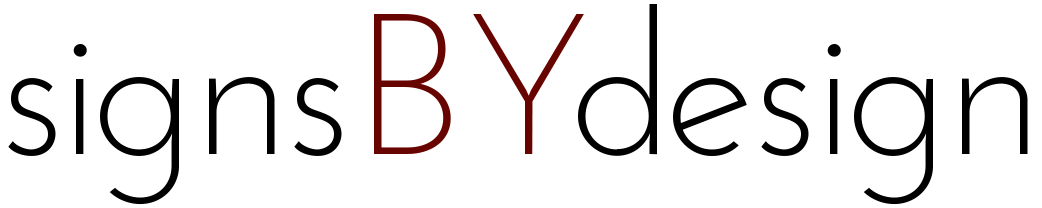
<style>
.page{position:relative;width:1042px;height:208px;background:#ffffff}
.page>*{position:absolute;margin:0}
.t1{font:199.7px "JosefinSansStd-Light";color:#000000}
.t2{font:199.7px "JosefinSansStd-Light";color:#670400}
</style>
<div class="page">
<p class="t1" style="left:8px;top:4px;width:1020px;height:201px">signs<span class="t2">BY</span>design</p>
</div>
